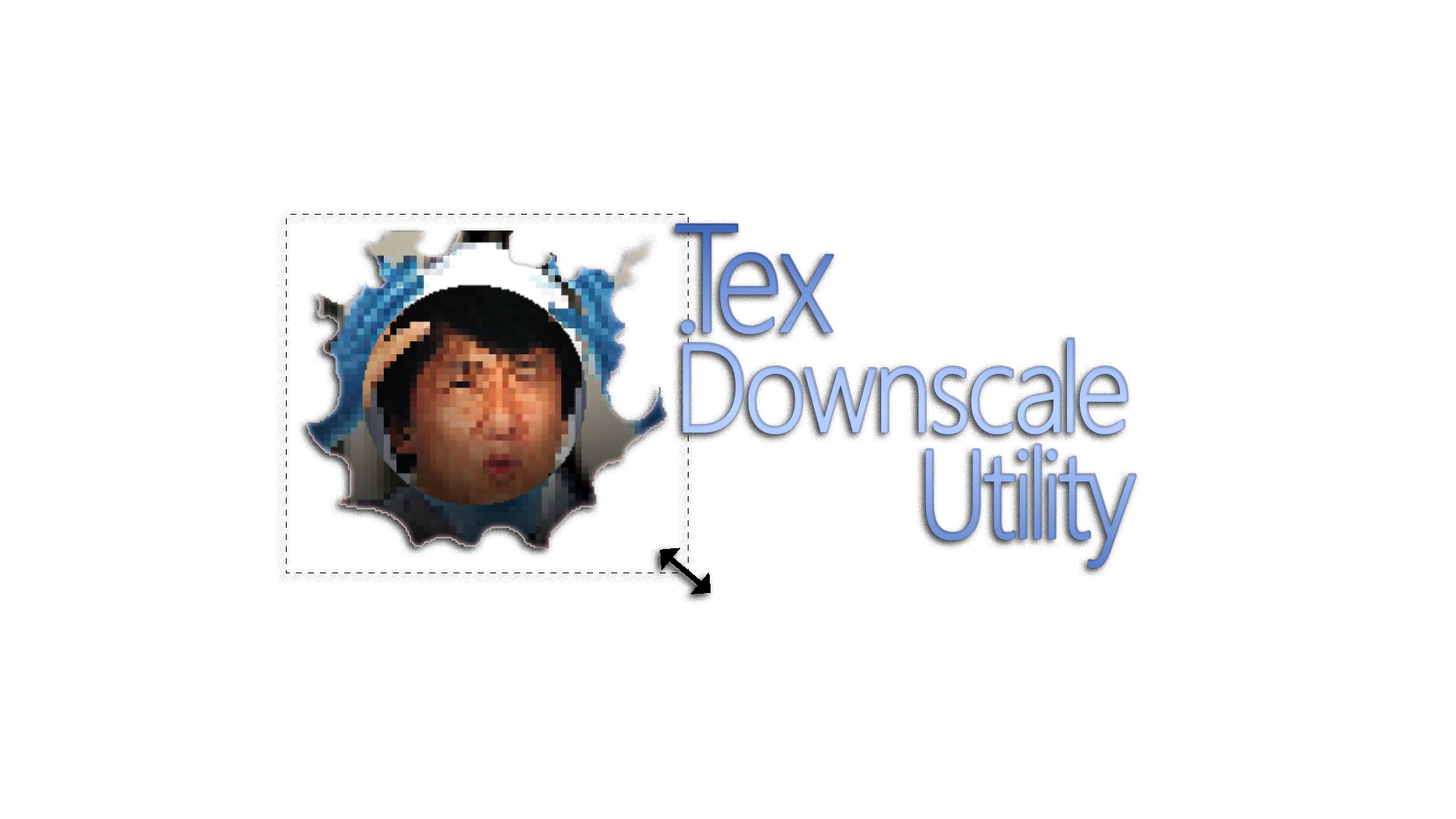
<style>
.page{position:relative;width:1456px;height:819px;background:#ffffff}
.page>*{position:absolute;margin:0}
.t1{font:152.4px "SegoeUI-Light";letter-spacing:-0.06em;font-weight:bold;scale:0.88 1}
.t2{font:152.4px "SegoeUI-Light";letter-spacing:-0.24em;font-weight:bold}
.t3{font:124.9px "SegoeUI-Light";letter-spacing:-0.06em;color:#afc9fd;font-weight:bold;scale:0.88 1}
.t4{font:124.9px "SegoeUI-Light";letter-spacing:-0.1em;color:#afc9fd;font-weight:bold;scale:0.88 1}
.t5{font:124.9px "SegoeUI-Light";letter-spacing:-0.08em;color:#afc9fd;font-weight:bold;scale:0.88 1}
.t6{font:124.9px "SegoeUI-Light";letter-spacing:-0.06em;font-weight:bold;scale:0.86 1}
.t7{font:124.9px "SegoeUI-Light";letter-spacing:-0.1em;font-weight:bold;scale:0.86 1}
</style>
<div class="page">
<p class="t1" style="left:676px;top:224px;width:158px;height:110px"><span class="t2">.</span>Tex</p>
<p class="t3" style="left:682px;top:337px;width:446px;height:98px">Downsc<span class="t4">a</span><span class="t5">l</span>e</p>
<p class="t6" style="left:925px;top:444px;width:212px;height:124px">Ut<span class="t7">il</span>ity</p>
</div>
